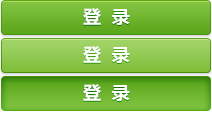
<style>
.page{position:relative;width:212px;height:114px}
.page>*{position:absolute;margin:0}
.t1{font:18px "MicrosoftYaHei-Bold";color:#ffffff}
</style>
<div class="page">
<p class="t1" style="left:83px;top:8px;width:47px;height:17px">登  录</p>
<p class="t1" style="left:83px;top:46px;width:47px;height:17px">登  录</p>
<p class="t1" style="left:83px;top:84px;width:47px;height:17px">登  录</p>
</div>
